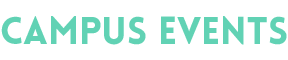
<style>
.page{position:relative;width:288px;height:60px;background:#ffffff}
.page>*{position:absolute;margin:0}
.t1{font:38px "Lovelo-Black";color:#61d2b4}
</style>
<div class="page">
<p class="t1" style="left:1px;top:16px;width:286px;height:29px">Campus Events</p>
</div>
